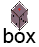
<style>
.page{position:relative;width:39px;height:47px;background:#ffffff}
.page>*{position:absolute;margin:0}
.t1{font:20px "Mangal";color:#000000}
</style>
<div class="page">
<p class="t1" style="left:3px;top:28px;width:33px;height:15px">box</p>
</div>
